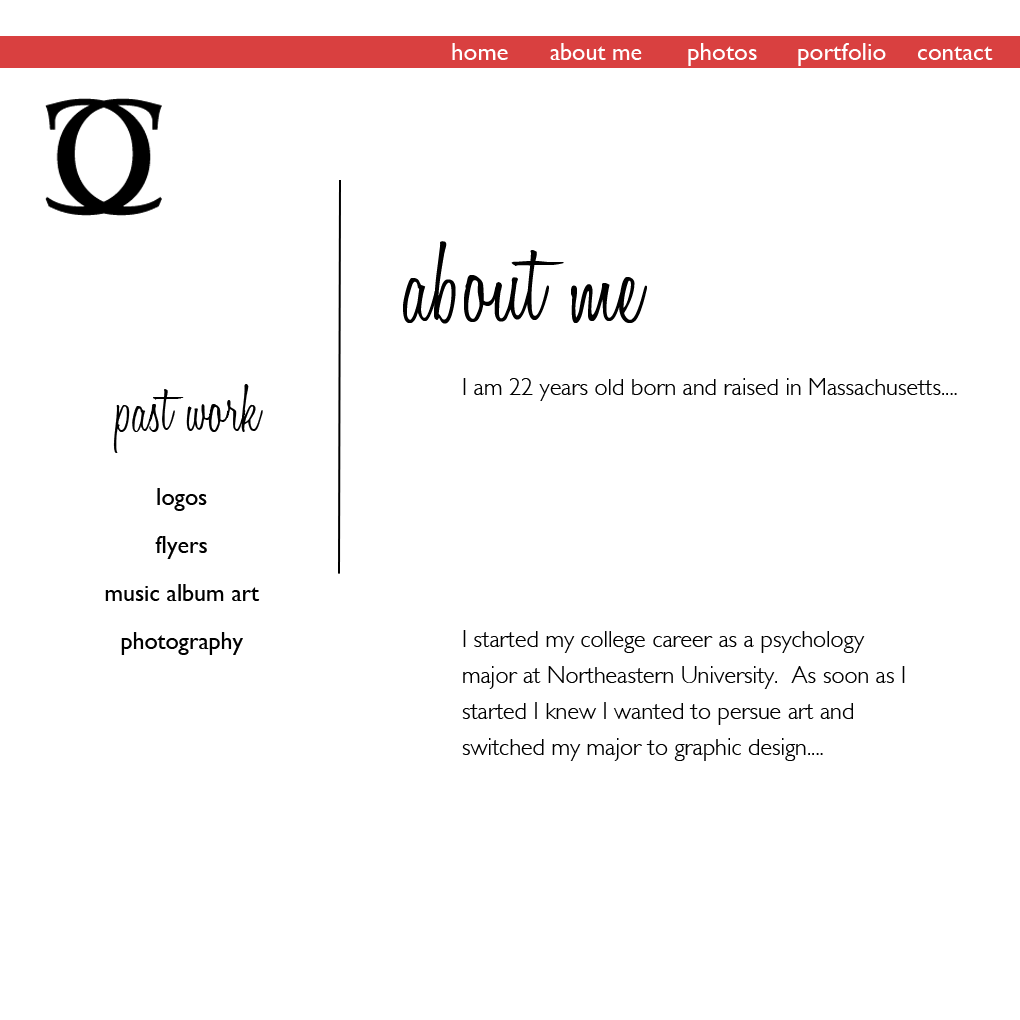
<style>
.page{position:relative;width:1020px;height:1020px;background:#ffffff}
.page>*{position:absolute;margin:0}
.t1{font:25px "GillSans";color:#ffffff}
.t2{font:24px "GillSans";color:#ffffff}
.t3{font:120px "HoneyScript-Light";color:#000000}
.t4{font:70px "HoneyScript-Light";color:#000000}
.t5{font:24px "GillSans-Light";color:#000000}
.t6{font:24px/48px "GillSans";color:#000000}
.t7{font:24px/36px "GillSans-Light";color:#000000}
</style>
<div class="page">
<p class="t1" style="left:452px;top:43px;width:56px;height:17px">home</p>
<p class="t2" style="left:550px;top:43px;width:92px;height:17px">about me</p>
<p class="t1" style="left:688px;top:43px;width:69px;height:23px">photos</p>
<p class="t1" style="left:798px;top:43px;width:88px;height:23px">portfolio</p>
<p class="t1" style="left:918px;top:46px;width:75px;height:14px">contact</p>
<p class="t3" style="left:403px;top:241px;width:244px;height:83px">about me</p>
<p class="t4" style="left:113px;top:384px;width:150px;height:69px">past work</p>
<p class="t5" style="left:463px;top:378px;width:494px;height:23px">I am 22 years old born and raised in Massachusetts....</p>
<p class="t6" style="left:105px;top:488px;width:155px;height:167px;text-align:center">logos<br>flyers<br>music album art<br>photography</p>
<p class="t7" style="left:462px;top:630px;width:443px;height:131px">I started my college career as a psychology major at Northeastern University.  As soon as I started I knew I wanted to persue art and switched my major to graphic design....</p>
</div>
